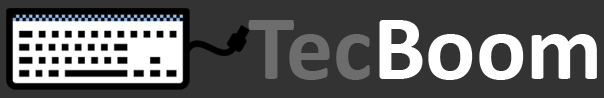
<style>
.page{position:relative;width:604px;height:98px;background:#333333}
.page>*{position:absolute;margin:0}
.t1{font:93.8px "Calibri-Bold";color:#ffffff}
.t2{font:93.8px "Calibri-Bold";color:#6e6d6d}
</style>
<div class="page">
<p class="t1" style="left:248px;top:20px;width:349px;height:60px"><span class="t2">Tec</span>Boom</p>
</div>
